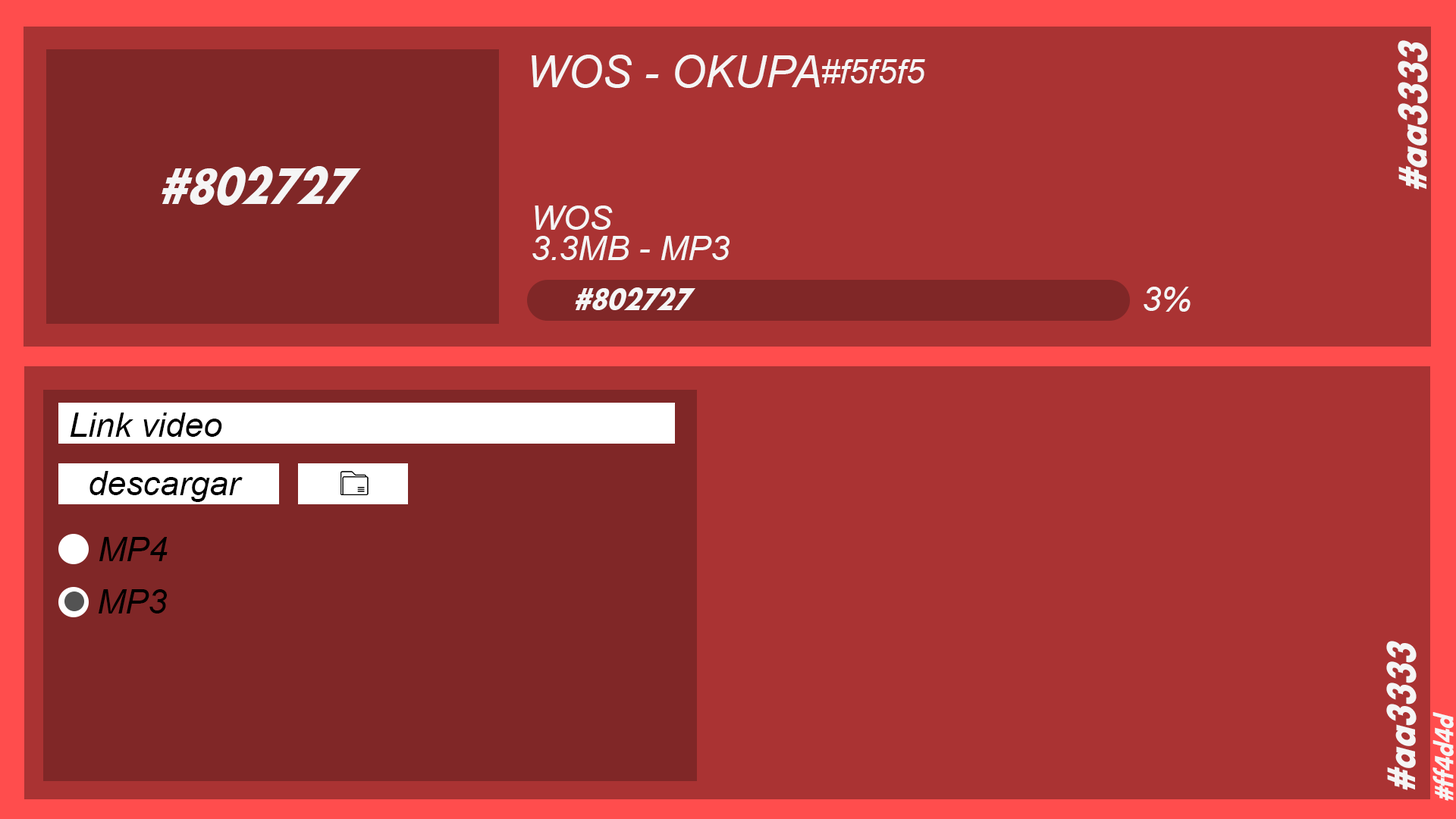
<style>
.page{position:relative;width:1456px;height:819px;background:#aa3333}
.page>*{position:absolute;margin:0}
.t1{font:41.2px "FuturaCndObl-Bo";color:#f5f5f5}
.t2{font:44px "Arial-ItalicMT";color:#f5f5f5}
.t3{font:34.2px "Arial-ItalicMT";color:#f5f5f5}
.t4{font:53.7px "FuturaCndObl-Bo";color:#f5f5f5}
.t5{font:32.4px "FuturaCndObl-Bo";color:#f5f5f5}
.t6{font:34.2px "Arial-ItalicMT";color:#000000}
.t7{font:27.4px "FuturaCndObl-Bo";color:#f5f5f5}
</style>
<div class="page">
<p class="t1" style="left:1398px;top:40px;width:30px;height:150px;rotate:-90deg">#aa3333</p>
<p class="t2" style="left:532px;top:55px;width:288px;height:33px">WOS - OKUPA</p>
<p class="t3" style="left:822px;top:59px;width:103px;height:24px">#f5f5f5</p>
<p class="t4" style="left:162px;top:166px;width:199px;height:40px">#802727</p>
<p class="t3" style="left:535px;top:206px;width:78px;height:24px">WOS</p>
<p class="t3" style="left:532px;top:236px;width:198px;height:24px">3.3MB - MP3</p>
<p class="t5" style="left:575px;top:287px;width:120px;height:23px">#802727</p>
<p class="t3" style="left:1144px;top:287px;width:47px;height:25px">3%</p>
<p class="t6" style="left:70px;top:413px;width:152px;height:24px">Link video</p>
<p class="t6" style="left:89px;top:471px;width:154px;height:31px">descargar</p>
<p class="t6" style="left:99px;top:537px;width:69px;height:24px">MP4</p>
<p class="t6" style="left:99px;top:589px;width:68px;height:24px">MP3</p>
<p class="t1" style="left:1386px;top:641px;width:31px;height:149px;rotate:-90deg">#aa3333</p>
<p class="t7" style="left:1432px;top:712px;width:22px;height:89px;rotate:-90deg">#ff4d4d</p>
</div>
